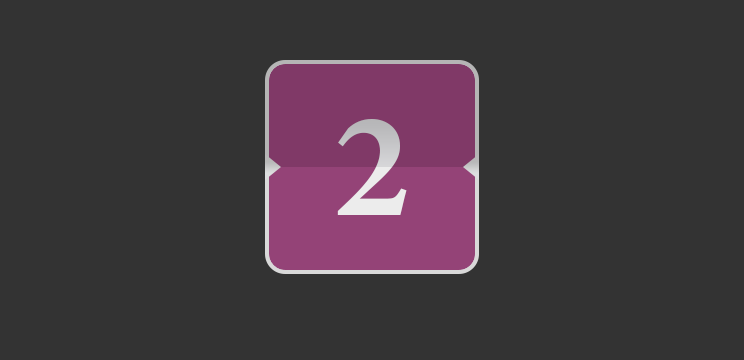
<style>
.page{position:relative;width:744px;height:360px;background:#333333}
.page>*{position:absolute;margin:0}
.t1{font:151.3px "MinionPro-Bold";scale:1.03 1}
</style>
<div class="page">
<p class="t1" style="left:337px;top:119px;width:70px;height:96px">2</p>
</div>
